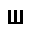
<style>
.page{position:relative;width:32px;height:32px;background:#ffffff}
.page>*{position:absolute;margin:0}
.t1{font:19px "TrebuchetMS-Bold";letter-spacing:0.025em;color:#000000}
</style>
<div class="page">
<p class="t1" style="left:8px;top:9px;width:15px;height:14px">Ш</p>
</div>
